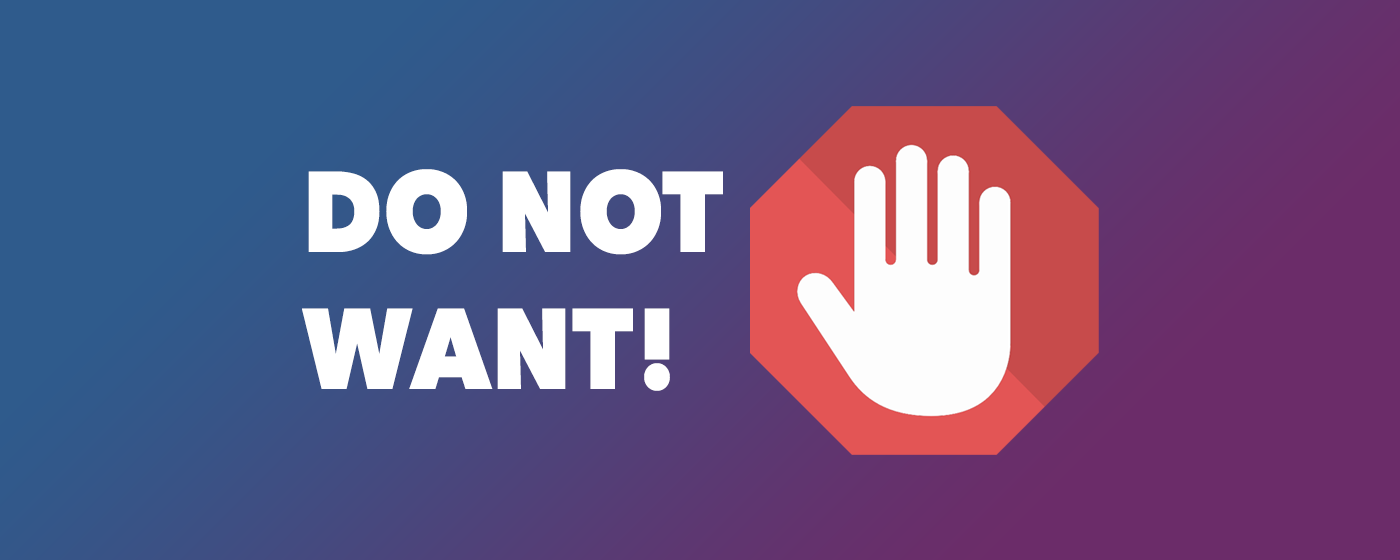
<style>
.page{position:relative;width:1400px;height:560px}
.page>*{position:absolute;margin:0}
.t1{font:113.9px "AvenirNext-Heavy";color:#ffffff;scale:0.9 1}
</style>
<div class="page">
<p class="t1" style="left:302px;top:169px;width:421px;height:222px">DO NOT<br>WANT!</p>
</div>
